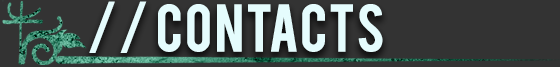
<style>
.page{position:relative;width:560px;height:67px;background:#333333}
.page>*{position:absolute;margin:0}
.t1{font:52.3px "Bebas";color:#e5fcfd;font-weight:bold}
</style>
<div class="page">
<p class="t1" style="left:89px;top:1px;width:294px;height:52px">// contacts</p>
</div>
